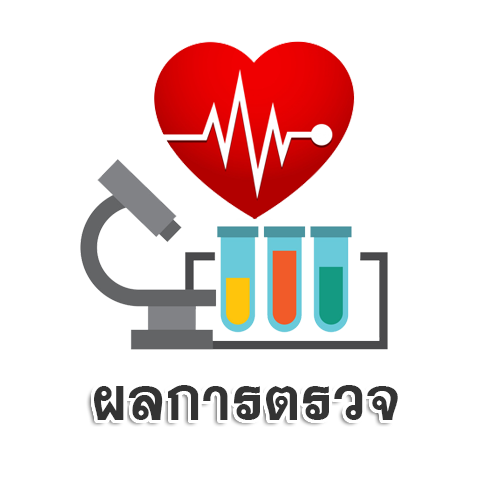
<style>
.page{position:relative;width:480px;height:480px;background:#ffffff}
.page>*{position:absolute;margin:0}
.t1{font:85px "JSSadayu-Bold";color:#333333}
</style>
<div class="page">
<p class="t1" style="left:94px;top:385px;width:304px;height:35px">ผลการตรวจ</p>
</div>
